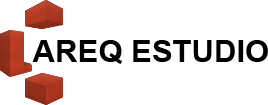
<style>
.page{position:relative;width:268px;height:105px;background:#ffffff}
.page>*{position:absolute;margin:0}
.t1{font:31.1px "Arial-BoldMT";color:#000000}
</style>
<div class="page">
<p class="t1" style="left:32px;top:40px;width:236px;height:24px">AREQ ESTUDIO</p>
</div>
